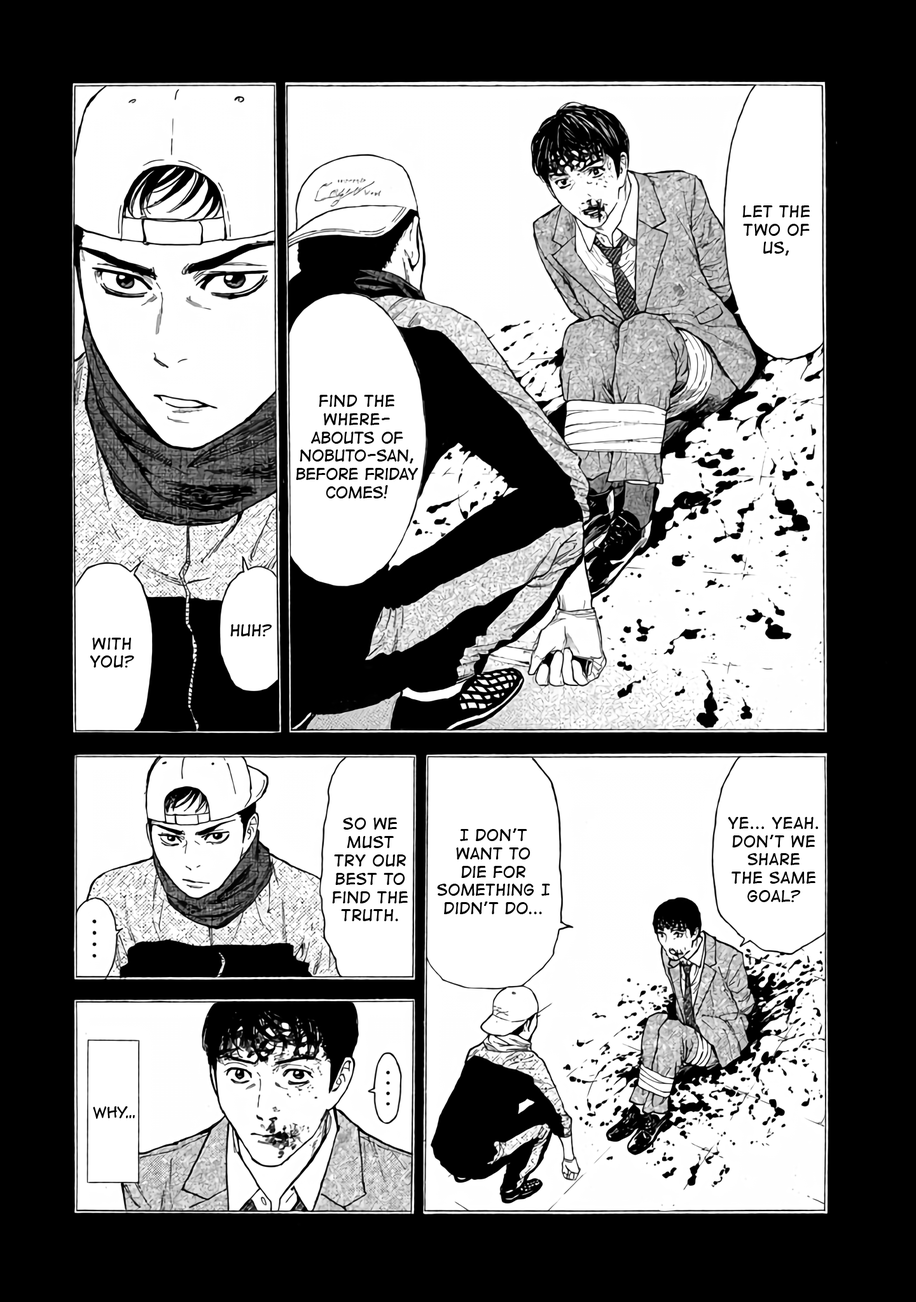
<style>
.page{position:relative;width:916px;height:1302px;background:#000000}
.page>*{position:absolute;margin:0}
.t1{font:15.3px "DigitalStrip";color:#000000}
.t2{font:14px "AnimeAce2.0BB";color:#000000}
</style>
<div class="page">
<p class="t1" style="left:742px;top:205px;width:67px;height:51px;text-align:center">Let the two of us,</p>
<p class="t1" style="left:296px;top:395px;width:122px;height:104px;text-align:center">Find the where-<br>abouts of Nobuto-san, before friday comes!</p>
<p class="t1" style="left:230px;top:624px;width:42px;height:13px">Huh?</p>
<p class="t1" style="left:90px;top:638px;width:44px;height:30px;text-align:center">With you?</p>
<p class="t1" style="left:332px;top:818px;width:76px;height:103px;text-align:center">So we must try our best to find the truth.</p>
<p class="t1" style="left:727px;top:817px;width:91px;height:85px;text-align:center">Ye... Yeah. Don’t we share the same goal?</p>
<p class="t1" style="left:437px;top:829px;width:113px;height:85px;text-align:center">I don’t want to die for something I didn’t do...</p>
<p class="t2" style="left:93px;top:1106px;width:42px;height:13px">Why…</p>
</div>
